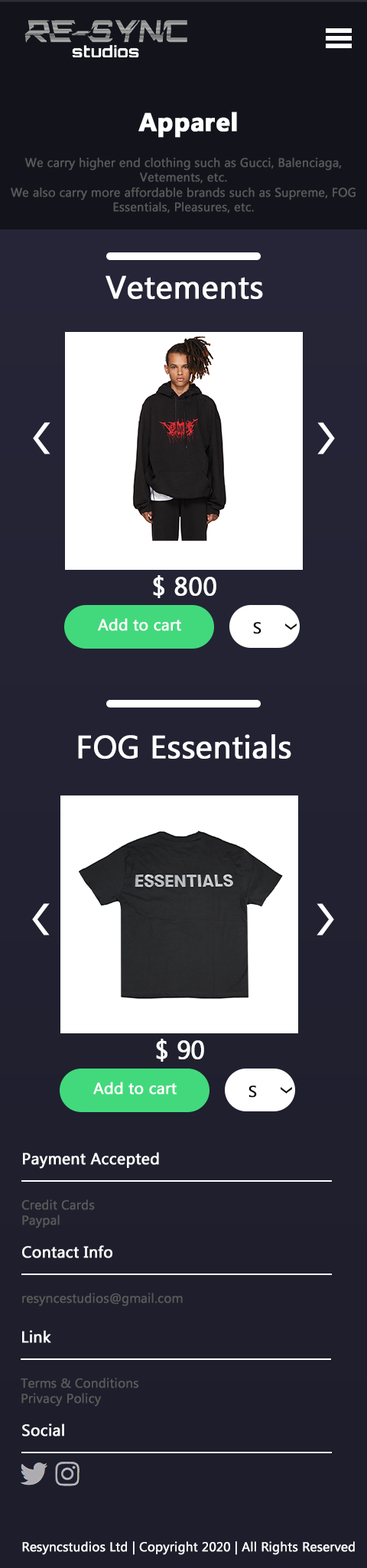
<style>
.page{position:relative;width:367px;height:1568px}
.page>*{position:absolute;margin:0}
.t1{font:25.5px "MicrosoftTaiLe-Bold";color:#ffffff;font-weight:bold}
.t2{font:12.2px "MicrosoftTaiLe";color:#595959;font-weight:bold}
.t3{font:31.9px "MicrosoftTaiLe";color:#ffffff;font-weight:bold}
.t4{font:25.5px "MicrosoftTaiLe";color:#ffffff;font-weight:bold}
.t5{font:15.9px "MicrosoftTaiLe";color:#ffffff;font-weight:bold}
.t6{font:15.9px "MicrosoftTaiLe";color:#000000;font-weight:bold}
.t7{font:12.7px "MicrosoftTaiLe";color:#595959;font-weight:bold}
.t8{font:12.7px "MicrosoftTaiLe";color:#ffffff;font-weight:bold}
</style>
<div class="page">
<p class="t1" style="left:138px;top:112px;width:99px;height:26px">Apparel</p>
<p class="t2" style="left:11px;top:158px;width:345px;height:55px;text-align:center">We carry higher end clothing such as Gucci, Balenciaga, Vetements, etc. <br>We also carry more affordable brands such as Supreme, FOG Essentials, Pleasures, etc.</p>
<p class="t3" style="left:106px;top:275px;width:157px;height:24px">Vetements</p>
<p class="t4" style="left:153px;top:575px;width:63px;height:23px">$ 800</p>
<p class="t5" style="left:98px;top:618px;width:83px;height:13px">Add to cart</p>
<p class="t6" style="left:253px;top:622px;width:9px;height:12px">S</p>
<p class="t3" style="left:78px;top:734px;width:213px;height:25px">FOG Essentials</p>
<p class="t4" style="left:156px;top:1039px;width:48px;height:23px">$ 90</p>
<p class="t5" style="left:93px;top:1082px;width:84px;height:13px">Add to cart</p>
<p class="t6" style="left:249px;top:1085px;width:8px;height:13px">S</p>
<p class="t5" style="left:23px;top:1152px;width:136px;height:17px">Payment Accepted</p>
<p class="t7" style="left:21px;top:1199px;width:74px;height:29px">Credit Cards<br>Paypal</p>
<p class="t5" style="left:22px;top:1245px;width:90px;height:13px">Contact Info</p>
<p class="t7" style="left:22px;top:1293px;width:161px;height:13px">resyncestudios@gmail.com</p>
<p class="t5" style="left:22px;top:1330px;width:29px;height:13px">Link</p>
<p class="t7" style="left:21px;top:1378px;width:117px;height:29px">Terms &amp; Conditions<br>Privacy Policy</p>
<p class="t5" style="left:22px;top:1423px;width:42px;height:13px">Social</p>
<p class="t8" style="left:22px;top:1541px;width:333px;height:14px">Resyncstudios Ltd | Copyright 2020 | All Rights Reserved</p>
</div>
